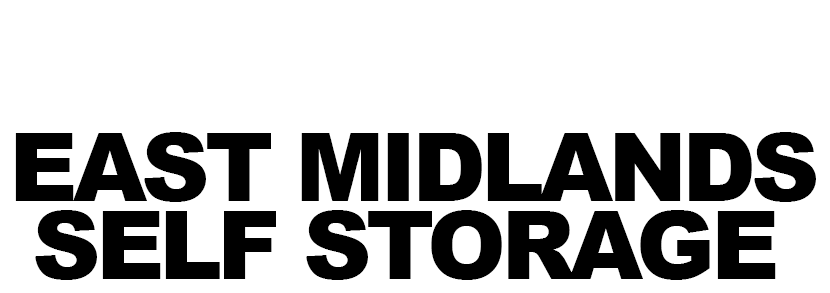
<style>
.page{position:relative;width:830px;height:293px;background:#ffffff}
.page>*{position:absolute;margin:0}
.t1{font:94.6px "Arial-Black";letter-spacing:-0.05em;color:#000000}
</style>
<div class="page">
<p class="t1" style="left:15px;top:132px;width:801px;height:70px">EAST MIDLANDS</p>
<p class="t1" style="left:35px;top:210px;width:741px;height:70px">SELF STORAGE</p>
</div>
